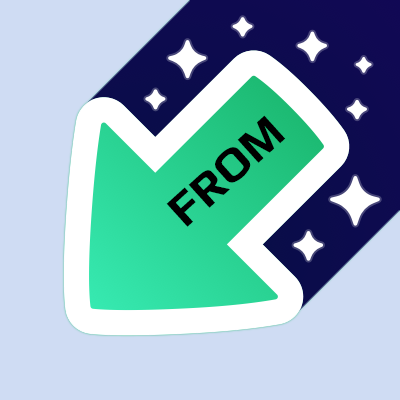
<style>
.page{position:relative;width:400px;height:400px;background:#cfdcf3}
.page>*{position:absolute;margin:0}
.t1{font:48px "Play-Bold";color:#000000}
</style>
<div class="page">
<p class="t1" style="left:166px;top:115px;width:120px;height:112px;rotate:-42deg">FROM</p>
</div>
